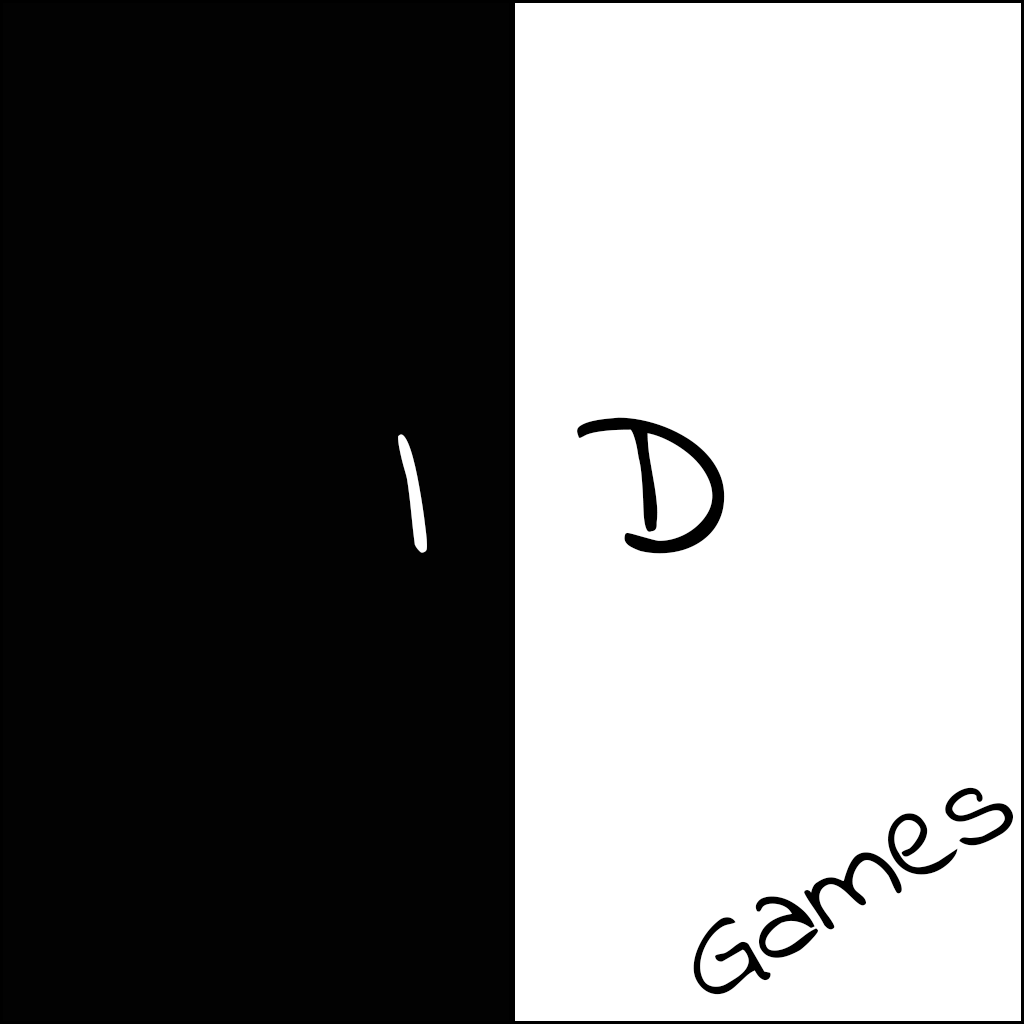
<style>
.page{position:relative;width:1024px;height:1024px;background:#020202}
.page>*{position:absolute;margin:0}
.t1{font:212px "IndieFlower";color:#000000}
.t2{font:212px "IndieFlower";color:#ffffff}
.t3{font:128px "IndieFlower";color:#000000}
</style>
<div class="page">
<p class="t1" style="left:577px;top:417px;width:148px;height:137px">D</p>
<p class="t2" style="left:398px;top:434px;width:29px;height:119px">I</p>
<p class="t3" style="left:693px;top:787px;width:320px;height:208px;rotate:-30deg">Games</p>
</div>
